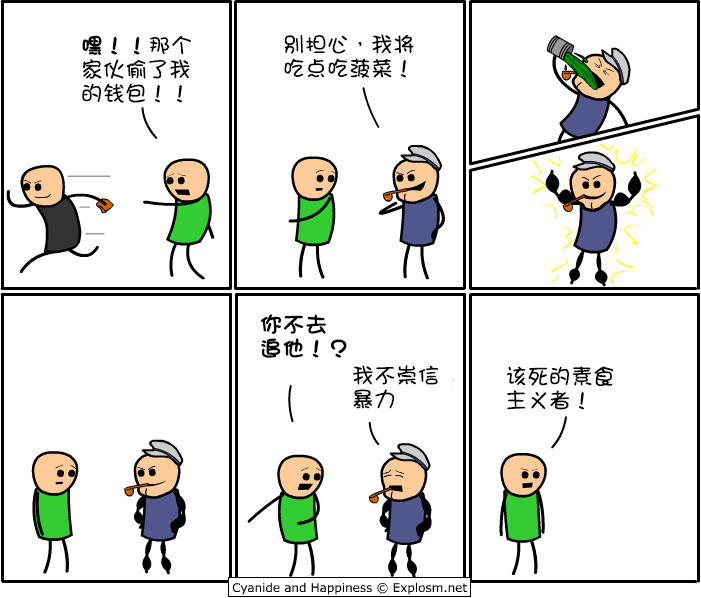
<style>
.page{position:relative;width:701px;height:598px;background:#ffffff}
.page>*{position:absolute;margin:0}
.t1{font:22px/24px "DFGirl";color:#000000}
.t2{font:22px/24px "DFGirl";color:#000000;font-weight:bold}
</style>
<div class="page">
<p class="t1" style="left:82px;top:35px;width:110px;height:68px"><span class="t2">嘿！！</span>那个<br>家伙偷了我<br>的钱包！！</p>
<p class="t1" style="left:284px;top:34px;width:130px;height:44px">别担心，我将<br>吃点吃菠菜！</p>
<p class="t2" style="left:260px;top:314px;width:87px;height:44px">你不去<br>追他！？</p>
<p class="t1" style="left:353px;top:365px;width:86px;height:44px">我不崇信<br>暴力</p>
<p class="t1" style="left:506px;top:366px;width:108px;height:44px">该死的素食<br>主义者！</p>
</div>
